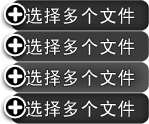
<style>
.page{position:relative;width:149px;height:124px}
.page>*{position:absolute;margin:0}
.t1{font:18px "SimHei";letter-spacing:0.025em;color:#ffffff;text-transform:uppercase}
</style>
<div class="page">
<p class="t1" style="left:26px;top:7px;width:109px;height:17px">选择多个文件</p>
<p class="t1" style="left:26px;top:38px;width:109px;height:17px">选择多个文件</p>
<p class="t1" style="left:26px;top:69px;width:109px;height:17px">选择多个文件</p>
<p class="t1" style="left:26px;top:100px;width:109px;height:17px">选择多个文件</p>
</div>
